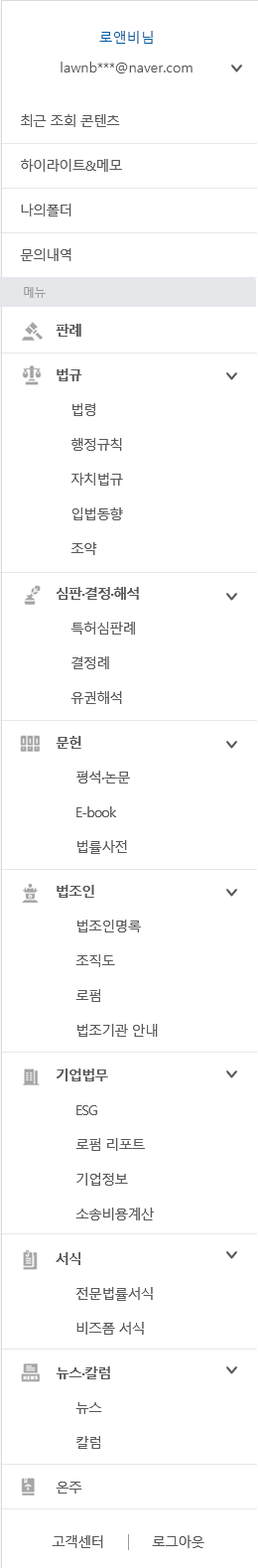
<style>
.page{position:relative;width:258px;height:1568px;background:#ffffff}
.page>*{position:absolute;margin:0}
.t1{font:13.9px/29.8px "MalgunGothic"}
.t2{font:13.9px/44.7px "MalgunGothic";letter-spacing:-0.06em;color:#585858}
.t3{font:11.9px "MalgunGothic";letter-spacing:-0.06em;color:#999999}
.t4{font:13.9px/34.8px "MalgunGothic";letter-spacing:-0.06em;color:#585858}
.t5{font:13.9px/44.7px "MalgunGothicBold";letter-spacing:-0.06em;color:#585858}
.t6{font:13.9px "MalgunGothic";letter-spacing:-0.06em;color:#585858}
</style>
<div class="page">
<p class="t1" style="left:48px;top:31px;width:153px;height:132px;text-align:center">로앤비님<br>lawnb***@naver.com<br>개인회원  |  Professional <br>2100-12-31 까지<br>나의모바일기기 삭제</p>
<p class="t2" style="left:20px;top:114px;width:102px;height:147px">최근 조회 콘텐츠         <br>하이라이트&amp;메모         <br>나의폴더         <br>문의내역</p>
<p class="t3" style="left:24px;top:287px;width:22px;height:11px">메뉴</p>
<p class="t4" style="left:56px;top:324px;width:102px;height:1170px"><span class="t5">판례<br>법규<br></span>법령<br>행정규칙<br>자치법규​<br>입법동향<br>조약<br><span class="t5">심판·결정·해석<br></span>특허심판례<br>결정례<br>유권해석<br><span class="t5">문헌 <br></span>평석·논문<br>E-book<br>법률사전<br><span class="t5">법조인 <br></span>법조인명록<br>조직도<br>로펌<br>법조기관 안내<br><span class="t5">기업법무<br></span>ESG<br>로펌 리포트<br>기업정보<br>소송비용계산<br><span class="t5">서식 <br></span>전문법률서식<br>비즈폼 서식<br><span class="t5">뉴스·칼럼 <br></span>뉴스<br>칼럼<br><span class="t2">온주</span></p>
<p class="t6" style="left:52px;top:1535px;width:51px;height:13px">고객센터</p>
<p class="t6" style="left:152px;top:1535px;width:53px;height:13px">로그아웃</p>
</div>
